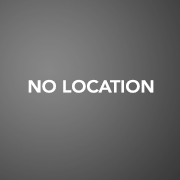
<style>
.page{position:relative;width:180px;height:180px}
.page>*{position:absolute;margin:0}
.t1{font:17.1px "Avenir-Heavy";color:#ffffff;scale:1.05 1}
</style>
<div class="page">
<p class="t1" style="left:28px;top:79px;width:126px;height:14px">NO LOCATION</p>
</div>
